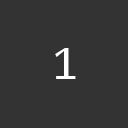
<style>
.page{position:relative;width:128px;height:128px;background:#333333}
.page>*{position:absolute;margin:0}
.t1{font:48px "Consolas";color:#ffffff}
</style>
<div class="page">
<p class="t1" style="left:55px;top:48px;width:21px;height:31px">1</p>
</div>
